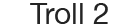
<style>
.page{position:relative;width:140px;height:28px;background:#ffffff}
.page>*{position:absolute;margin:0}
.t1{font:30px "HelveticaNeue";color:#242424}
</style>
<div class="page">
<p class="t1" style="left:30px;top:3px;width:78px;height:21px">Troll 2</p>
</div>
